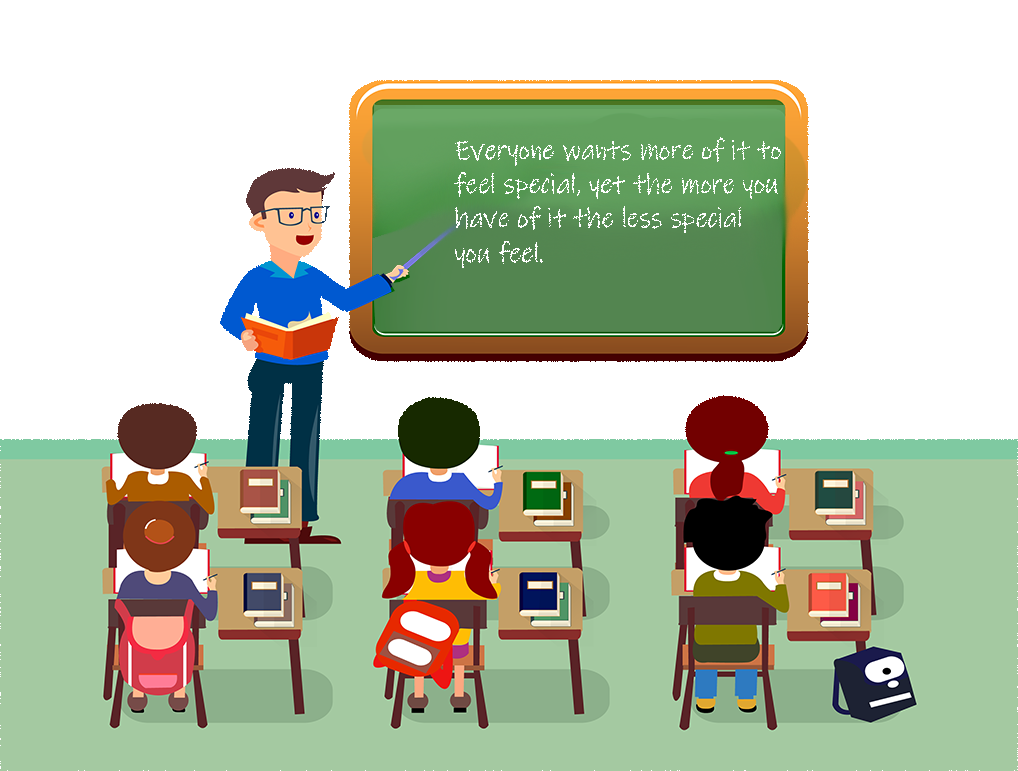
<style>
.page{position:relative;width:1018px;height:771px;background:#ffffff}
.page>*{position:absolute;margin:0}
.t1{font:28.6px "InkFree";color:#ffffff;scale:0.92 1}
</style>
<div class="page">
<p class="t1" style="left:454px;top:137px;width:328px;height:132px">Everyone wants more of it to feel special, yet the more you have of it the less special you feel.</p>
</div>
